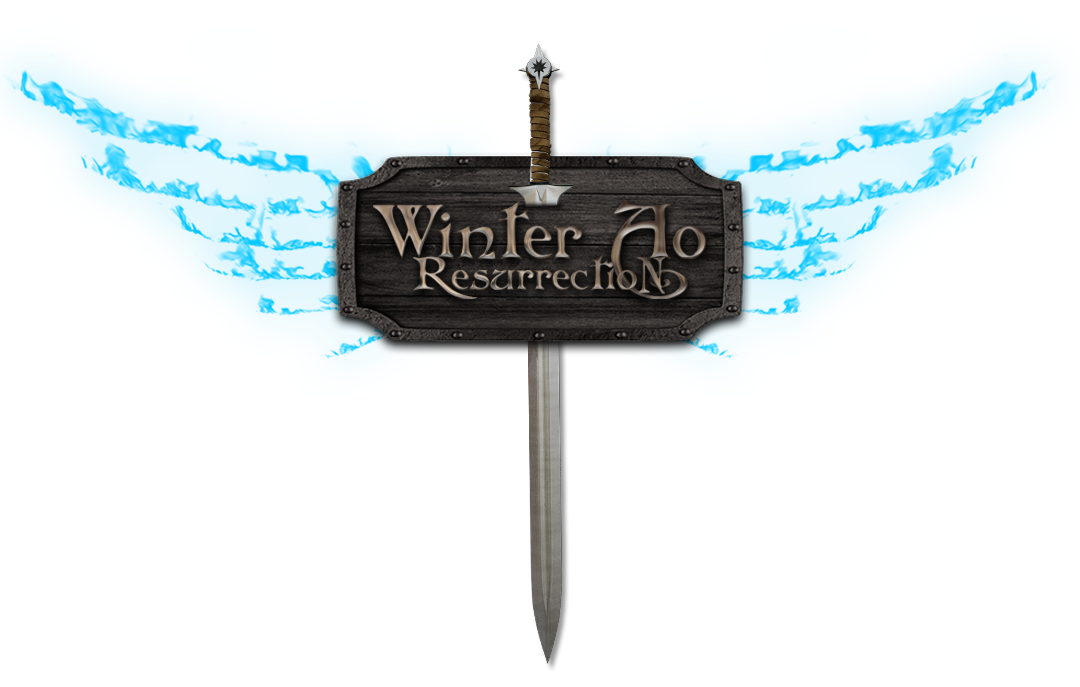
<style>
.page{position:relative;width:1080px;height:687px;background:#ffffff}
.page>*{position:absolute;margin:0}
.t1{font:74.1px "Folkard"}
.t2{font:44.9px "Folkard"}
</style>
<div class="page">
<p class="t1" style="left:372px;top:200px;width:334px;height:99px">Winter Ao</p>
<p class="t2" style="left:413px;top:255px;width:253px;height:44px">ResurrectioN</p>
</div>
